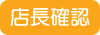
<style>
.page{position:relative;width:100px;height:35px;background:#faa61b}
.page>*{position:absolute;margin:0}
.t1{font:20px "DFYuan-Md-HK-BF";color:#ffffff}
</style>
<div class="page">
<p class="t1" style="left:10px;top:7px;width:80px;height:19px">店長確認</p>
</div>
